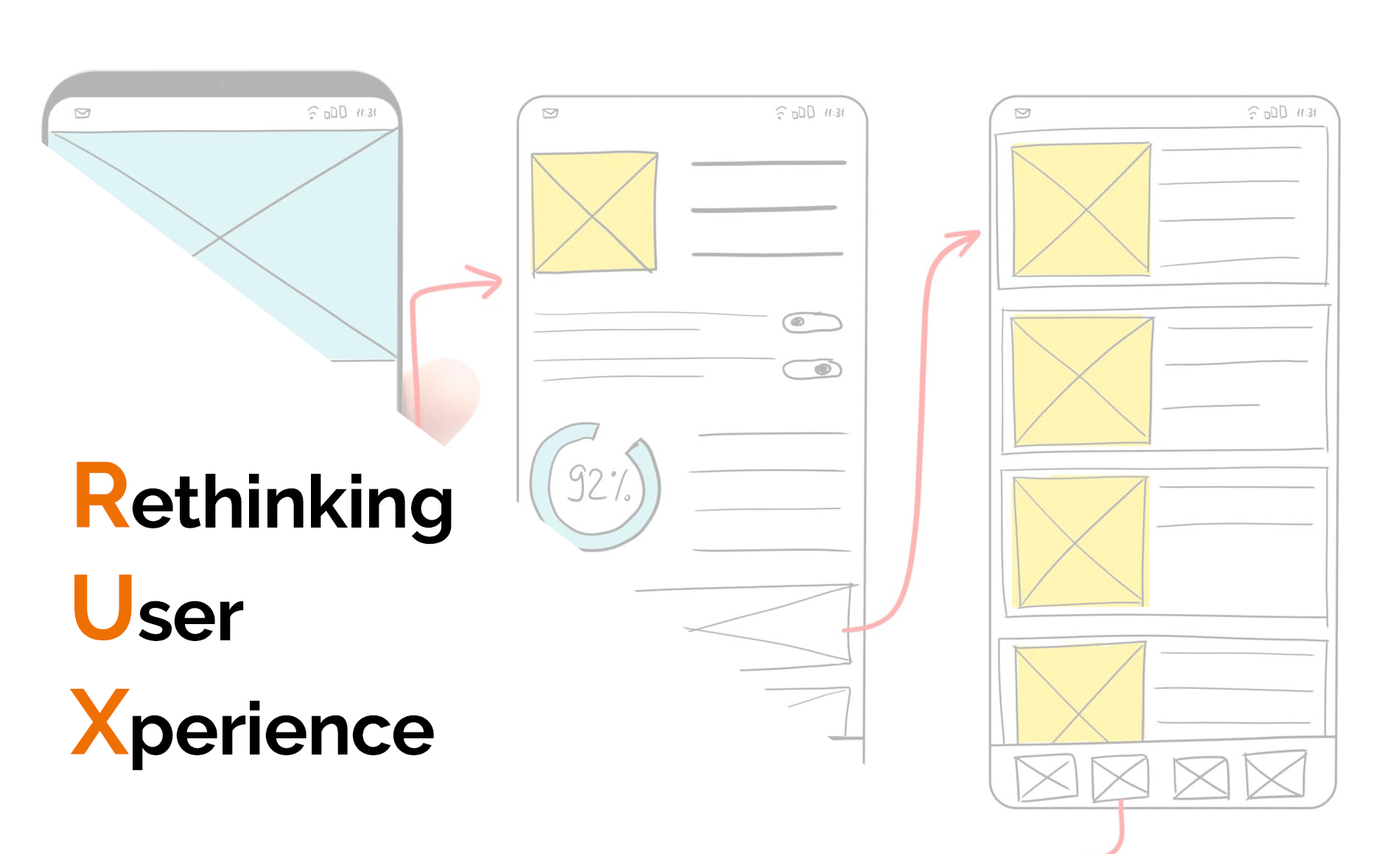
<style>
.page{position:relative;width:1397px;height:854px;background:#ffffff}
.page>*{position:absolute;margin:0}
.t1{font:73.7px "Raleway-Bold";letter-spacing:-0.01em;color:#000000}
.t2{font:92.1px "Raleway-Bold";letter-spacing:-0.01em;color:#ee7002}
</style>
<div class="page">
<p class="t1" style="left:77px;top:461px;width:375px;height:83px"><span class="t2">R</span>ethinking</p>
<p class="t1" style="left:74px;top:574px;width:170px;height:67px"><span class="t2">U</span>ser</p>
<p class="t1" style="left:69px;top:688px;width:365px;height:83px"><span class="t2">X</span>perience</p>
</div>
